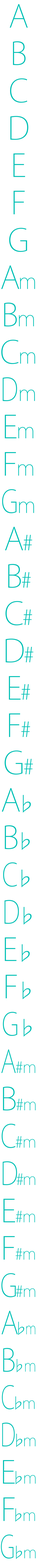
<style>
.page{position:relative;width:37px;height:1568px;background:#ffffff}
.page>*{position:absolute;margin:0}
.t1{font:31.1px/37.3px "KozGoPr6N-ExtraLight";color:#00c0b5}
.t2{font:31.1px/37.3px "KozGoPr6N-ExtraLight";letter-spacing:-0.06em;color:#00c0b5}
.t3{font:20.7px/37.3px "KozGoPr6N-ExtraLight";letter-spacing:-0.06em;color:#00c0b5}
.t4{font:31.1px/37.3px "KozGoPr6N-ExtraLight";letter-spacing:-0.04em;color:#00c0b5}
.t5{font:20.7px/37.3px "KozGoPr6N-ExtraLight";letter-spacing:-0.04em;color:#00c0b5}
.t6{font:31.1px/37.3px "KozGoPr6N-ExtraLight";color:#00c0b5;scale:0.8 1}
.t7{font:20.7px/37.3px "KozGoPr6N-ExtraLight";color:#00c0b5}
.t8{font:31.1px/37.3px "KozGoPr6N-ExtraLight";letter-spacing:-0.04em;color:#00c0b5;scale:0.8 1}
.t9{font:31.1px/37.3px "KozGoPr6N-ExtraLight";letter-spacing:-0.16em;color:#00c0b5}
.t10{font:20.7px/37.3px "KozGoPr6N-ExtraLight";letter-spacing:-0.16em;color:#00c0b5}
.t11{font:31.1px/37.3px "KozGoPr6N-ExtraLight";letter-spacing:-0.14em;color:#00c0b5}
.t12{font:20.7px/37.3px "KozGoPr6N-ExtraLight";letter-spacing:-0.14em;color:#00c0b5}
.t13{font:31.1px/37.3px "KozGoPr6N-ExtraLight";letter-spacing:-0.14em;color:#00c0b5;scale:0.8 1}
.t14{font:31.1px/37.3px "KozGoPr6N-ExtraLight";letter-spacing:-0.1em;color:#00c0b5}
.t15{font:20.7px/37.3px "KozGoPr6N-ExtraLight";letter-spacing:-0.1em;color:#00c0b5}
.t16{font:31.1px/37.3px "KozGoPr6N-ExtraLight";letter-spacing:-0.1em;color:#00c0b5;scale:0.8 1}
.t17{font:15.6px/37.3px "KozGoPr6N-ExtraLight";letter-spacing:-0.04em;color:#00c0b5}
.t18{font:31.1px/37.3px "KozGoPr6N-ExtraLight";letter-spacing:-0.08em;color:#00c0b5;scale:0.8 1}
.t19{font:15.6px/37.3px "KozGoPr6N-ExtraLight";letter-spacing:-0.08em;color:#00c0b5}
.t20{font:31.1px/37.3px "KozGoPr6N-ExtraLight";letter-spacing:-0.2em;color:#00c0b5;scale:0.9 1}
.t21{font:15.6px/37.3px "KozGoPr6N-ExtraLight";letter-spacing:-0.2em;color:#00c0b5}
.t22{font:15.6px/37.3px "KozGoPr6N-ExtraLight";letter-spacing:-0.2em;color:#00c0b5;scale:0.8 1}
.t23{font:31.1px/37.3px "KozGoPr6N-ExtraLight";letter-spacing:-0.14em;color:#00c0b5;scale:0.9 1}
.t24{font:15.6px/37.3px "KozGoPr6N-ExtraLight";letter-spacing:-0.14em;color:#00c0b5;scale:0.9 1}
.t25{font:31.1px/37.3px "KozGoPr6N-ExtraLight";letter-spacing:-0.22em;color:#00c0b5;scale:0.7 1}
.t26{font:15.6px/37.3px "KozGoPr6N-ExtraLight";letter-spacing:-0.22em;color:#00c0b5}
.t27{font:31.1px/37.3px "KozGoPr6N-ExtraLight";letter-spacing:-0.18em;color:#00c0b5}
.t28{font:15.6px/37.3px "KozGoPr6N-ExtraLight";letter-spacing:-0.18em;color:#00c0b5}
.t29{font:31.1px/37.3px "KozGoPr6N-ExtraLight";letter-spacing:-0.2em;color:#00c0b5}
.t30{font:31.1px/37.3px "KozGoPr6N-ExtraLight";letter-spacing:-0.2em;color:#00c0b5;scale:0.7 1}
.t31{font:15.6px/37.3px "KozGoPr6N-ExtraLight";color:#00c0b5}
</style>
<div class="page">
<p class="t1" style="left:1px;top:4px;width:35px;height:1555px;text-align:center">A<br>B<br>C<br>D<br>E<br>F<br>G<br><span class="t2">A</span><span class="t3">m<br></span><span class="t4">B</span><span class="t5">m<br></span><span class="t4">C</span><span class="t5">m<br></span><span class="t6">D</span><span class="t7">m<br></span><span class="t4">E</span><span class="t5">m<br></span><span class="t4">F</span><span class="t5">m<br></span><span class="t8">G</span><span class="t7">m<br></span><span class="t4">A</span><span class="t5">#<br></span><span class="t4">B</span><span class="t5">#<br></span><span class="t4">C</span><span class="t5">#<br></span><span class="t4">D</span><span class="t5">#<br></span><span class="t4">E</span><span class="t5">#<br></span><span class="t4">F</span><span class="t5">#<br></span><span class="t4">G</span><span class="t5">#<br></span><span class="t9">A</span><span class="t10">♭<br></span><span class="t11">B</span><span class="t12">♭<br></span><span class="t13">C</span><span class="t12">♭<br></span><span class="t13">D</span><span class="t5">♭<br></span><span class="t14">E</span><span class="t15">♭<br></span><span class="t14">F</span><span class="t15">♭</span><span class="t16">G</span><span class="t15">♭<br></span><span class="t8">A</span><span class="t17">#m<br></span><span class="t4">B</span><span class="t17">#m<br></span><span class="t8">C</span><span class="t17">#m<br></span><span class="t18">D</span><span class="t19">#m<br></span><span class="t4">E</span><span class="t17">#m<br></span><span class="t4">F</span><span class="t17">#m<br></span><span class="t18">G</span><span class="t17">#m<br></span><span class="t20">A</span><span class="t21">♭</span><span class="t22">m<br></span><span class="t23">B</span><span class="t24">♭m<br></span><span class="t25">C</span><span class="t26">♭m<br></span><span class="t25">D</span><span class="t26">♭m<br></span><span class="t27">E</span><span class="t28">♭m<br></span><span class="t29">F</span><span class="t21">♭m<br></span><span class="t30">G</span><span class="t21">♭</span><span class="t31">m</span></p>
</div>
